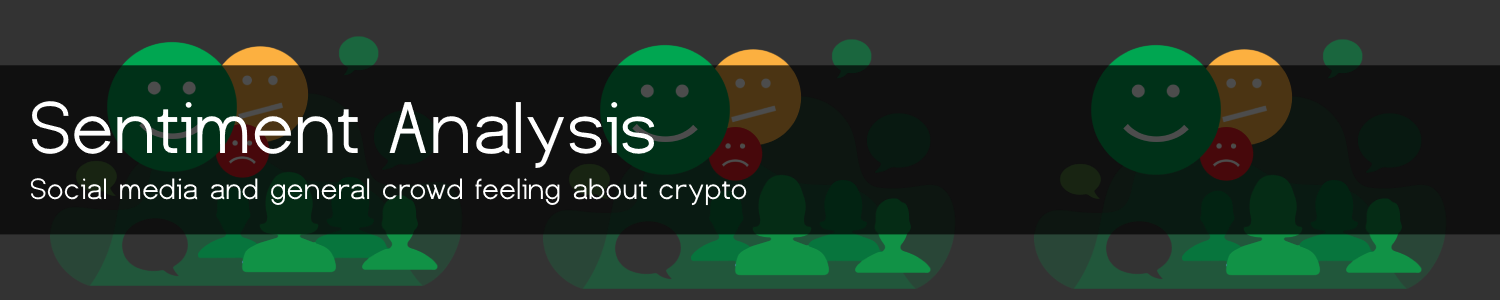
<style>
.page{position:relative;width:1500px;height:300px;background:#333333}
.page>*{position:absolute;margin:0}
.t1{font:77px "Dustismo";color:#ffffff}
.t2{font:31px "Dustismo";color:#ffffff}
</style>
<div class="page">
<p class="t1" style="left:31px;top:101px;width:624px;height:68px">Sentiment Analysis</p>
<p class="t2" style="left:30px;top:178px;width:717px;height:28px">Social media and general crowd feeling about crypto</p>
</div>
